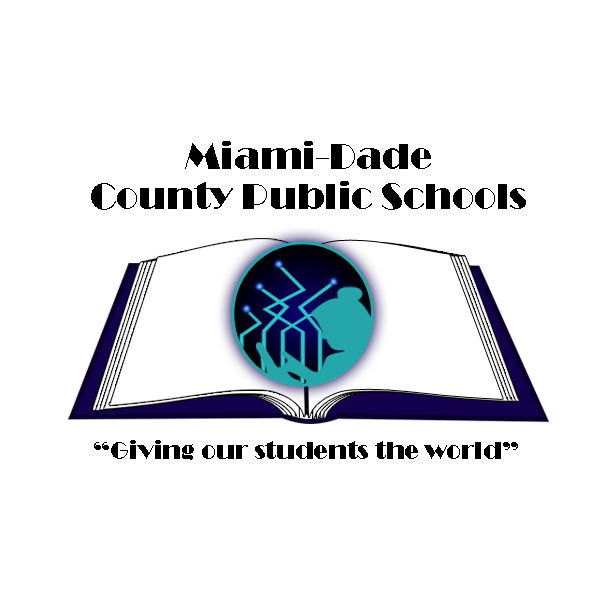
<style>
.page{position:relative;width:600px;height:600px;background:#ffffff}
.page>*{position:absolute;margin:0}
.t1{font:37.5px/8px "Broadway";color:#000000}
.t2{font:25px "Broadway";color:#000000}
</style>
<div class="page">
<p class="t1" style="left:91px;top:141px;width:435px;height:69px;text-align:center">Miami-Dade<br><br><br><br><br>County Public Schools</p>
<p class="t2" style="left:94px;top:440px;width:424px;height:20px">“Giving our students the world”</p>
</div>
